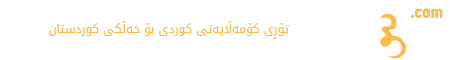
<style>
.page{position:relative;width:450px;height:60px;background:#ffffff}
.page>*{position:absolute;margin:0}
.t1{font:78px "Mj_DamaaLight";color:#fdba4d}
.t2{font:17px "Uni-Sans-Bold";color:#fdba4d}
.t3{font:12px "DroidArabicKufi";color:#fdba4d}
</style>
<div class="page">
<p class="t1" style="left:380px;top:13px;width:27px;height:46px;rotate:-90deg">س</p>
<p class="t2" style="left:410px;top:8px;width:33px;height:10px">.com</p>
<p class="t3" style="left:49px;top:21px;width:241px;height:18px">تۆڕی کۆمەڵایەتی کوردی بۆ خەڵکی کوردستان</p>
</div>
